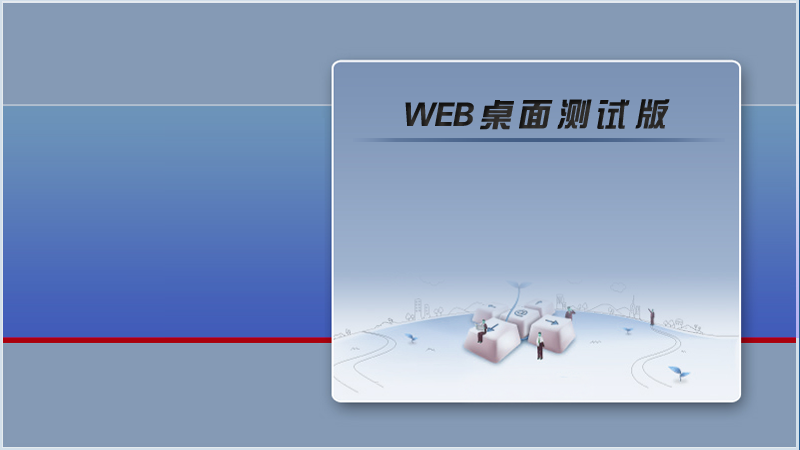
<style>
.page{position:relative;width:800px;height:450px;background:#859ab5}
.page>*{position:absolute;margin:0}
.t1{font:32.5px "JZhongYi";letter-spacing:-0.05em;color:#262422;font-style:italic}
</style>
<div class="page">
<p class="t1" style="left:405px;top:99px;width:265px;height:31px">WEB 桌 面 测 试 版</p>
</div>
